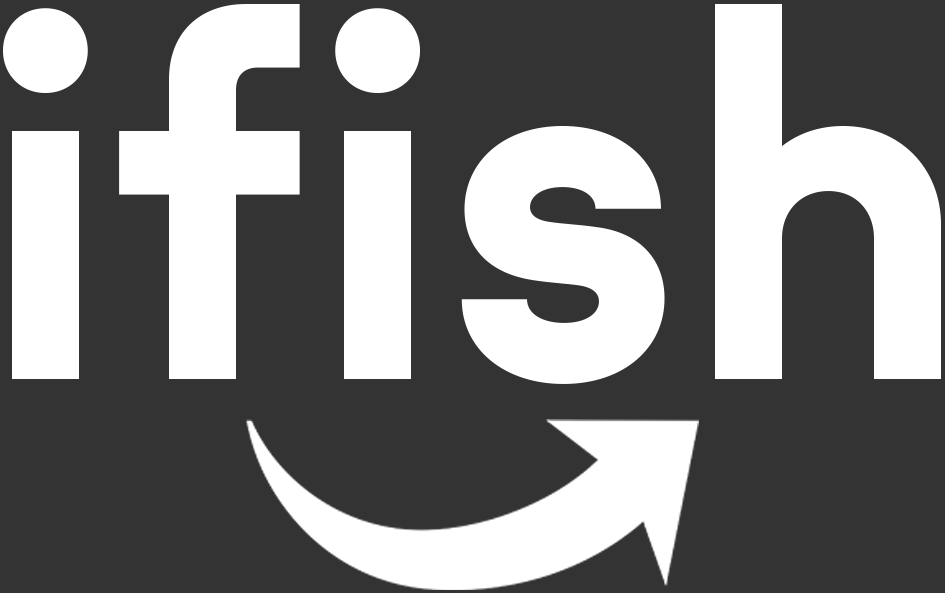
<style>
.page{position:relative;width:945px;height:593px;background:#333333}
.page>*{position:absolute;margin:0}
.t1{font:492.6px "SulSans-Bold";color:#ffffff}
</style>
<div class="page">
<p class="t1" style="left:3px;top:4px;width:938px;height:380px">ifish</p>
</div>
